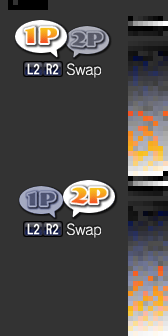
<style>
.page{position:relative;width:168px;height:336px;background:#333333}
.page>*{position:absolute;margin:0}
.t1{font:14px/160px "RodinNTLGPro-L";color:#ffffff}
</style>
<div class="page">
<p class="t1" style="left:67px;top:63px;width:34px;height:175px">Swap<br>Swap</p>
</div>
